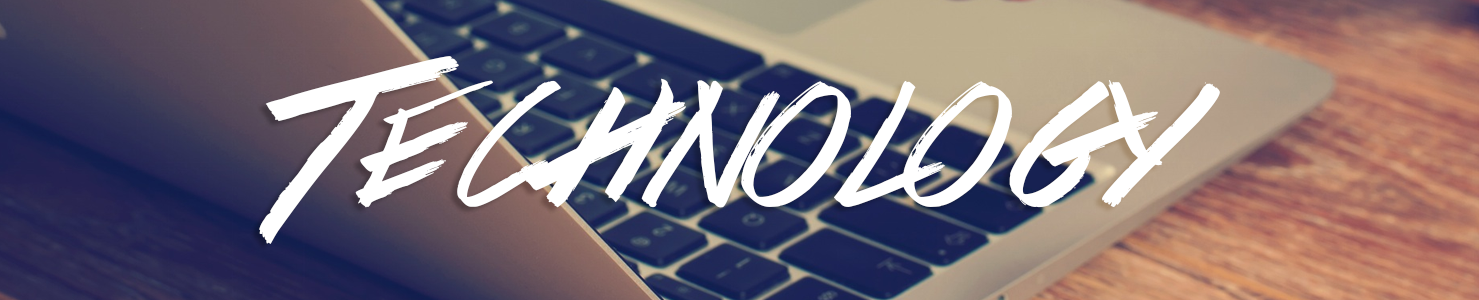
<style>
.page{position:relative;width:1479px;height:300px}
.page>*{position:absolute;margin:0}
.t1{font:180px "ColorsOfAutumn";color:#ffffff}
</style>
<div class="page">
<p class="t1" style="left:259px;top:56px;width:961px;height:188px">Technology</p>
</div>
